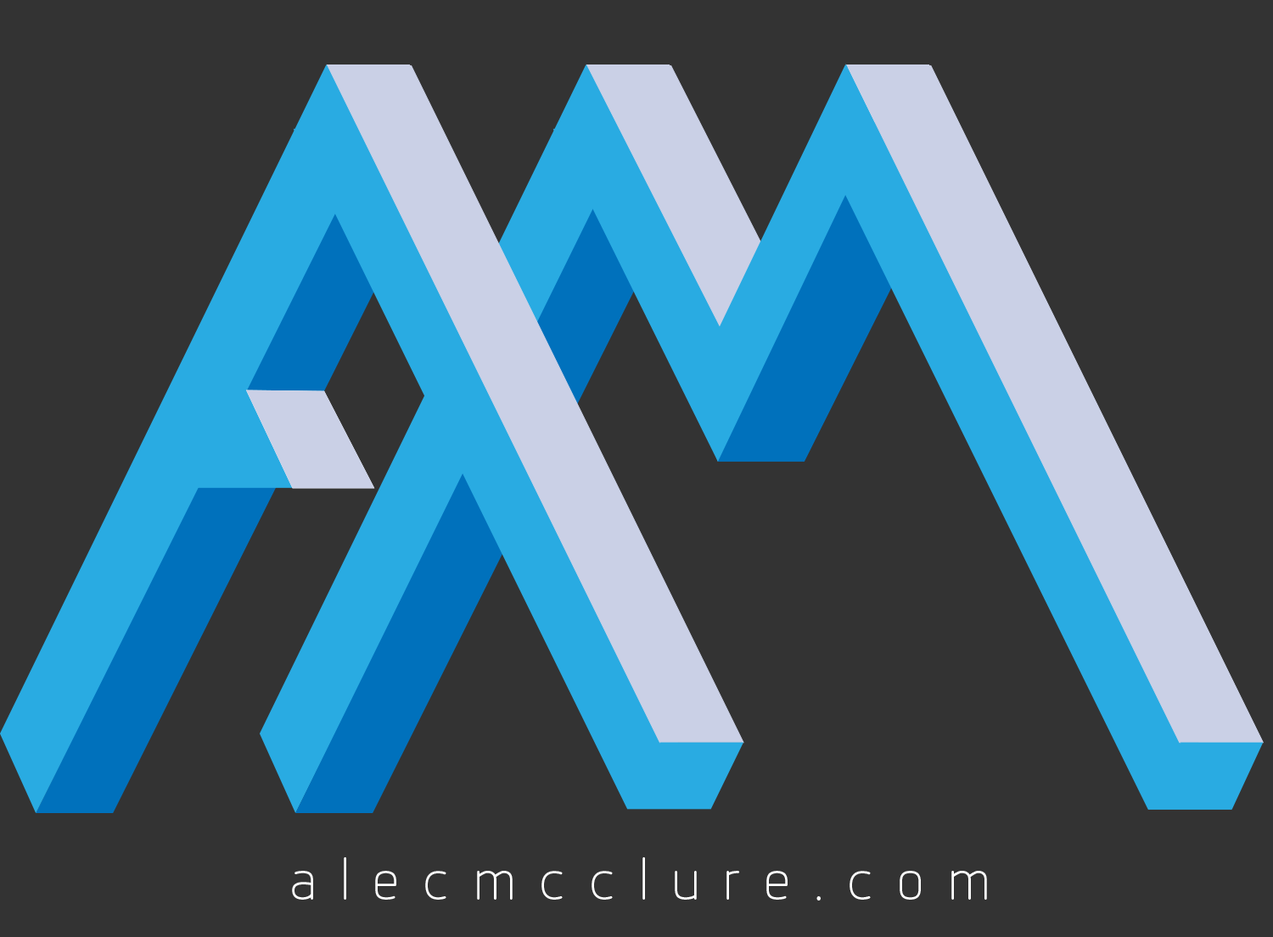
<style>
.page{position:relative;width:1273px;height:937px;background:#333333}
.page>*{position:absolute;margin:0}
.t1{font:63.6px "Designio";letter-spacing:0.34em;color:#ffffff}
</style>
<div class="page">
<p class="t1" style="left:292px;top:857px;width:695px;height:43px">alecmcclure.com</p>
</div>
